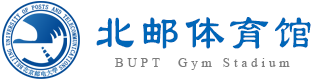
<style>
.page{position:relative;width:330px;height:80px;background:#ffffff}
.page>*{position:absolute;margin:0}
.t1{font:50px "LiSu";letter-spacing:0.12em;color:#0066b8;scale:0.8 1}
.t2{font:13px "TimesNewRomanPSMT";letter-spacing:0.3em;color:#7d7d7d}
</style>
<div class="page">
<p class="t1" style="left:96px;top:17px;width:215px;height:32px">北邮体育馆</p>
<p class="t2" style="left:115px;top:58px;width:175px;height:12px">BUPT  Gym Stadium</p>
</div>
